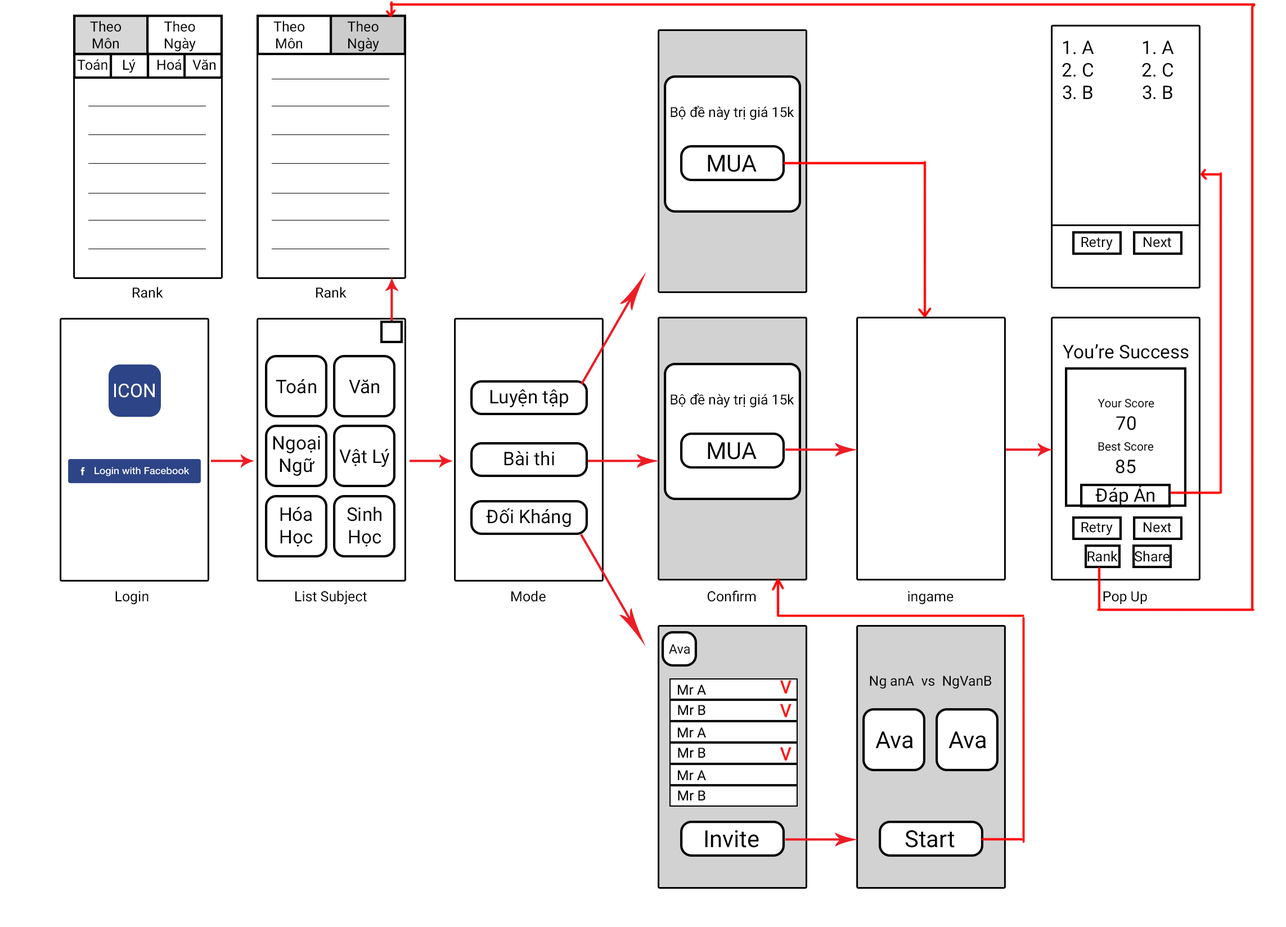
<style>
.page{position:relative;width:1286px;height:927px;background:#ffffff}
.page>*{position:absolute;margin:0}
.t1{font:14.1px "Roboto-Regular";color:#000000}
.t2{font:18.8px "Roboto-Regular";color:#000000}
.t3{font:13.9px "Roboto-Regular";color:#000000}
.t4{font:23.4px "Roboto-Regular";color:#000000}
.t5{font:18.8px "Roboto-Regular";color:#ffffff}
.t6{font:11.7px "Roboto-Regular";color:#000000}
.t7{font:13.2px "Roboto-Regular";color:#000000}
</style>
<div class="page">
<p class="t1" style="left:90px;top:21px;width:32px;height:28px;text-align:center">Theo<br>Môn</p>
<p class="t1" style="left:164px;top:21px;width:32px;height:31px;text-align:center">Theo<br>Ngày</p>
<p class="t1" style="left:273px;top:21px;width:32px;height:28px;text-align:center">Theo<br>Môn</p>
<p class="t1" style="left:348px;top:21px;width:31px;height:31px;text-align:center">Theo<br>Ngày</p>
<p class="t2" style="left:1062px;top:41px;width:32px;height:59px;text-align:center">1. A<br>2. C<br>3. B</p>
<p class="t2" style="left:1142px;top:41px;width:32px;height:59px;text-align:center">1. A<br>2. C<br>3. B</p>
<p class="t1" style="left:77px;top:59px;width:138px;height:14px">Toán    Lý      Hoá   Văn</p>
<p class="t3" style="left:671px;top:106px;width:123px;height:14px">Bộ đề này trị giá 15k</p>
<p class="t4" style="left:708px;top:155px;width:49px;height:17px">MUA</p>
<p class="t1" style="left:1081px;top:237px;width:32px;height:13px">Retry</p>
<p class="t1" style="left:1144px;top:237px;width:27px;height:11px">Next</p>
<p class="t1" style="left:133px;top:287px;width:30px;height:11px">Rank</p>
<p class="t1" style="left:316px;top:287px;width:31px;height:11px">Rank</p>
<p class="t2" style="left:1063px;top:344px;width:126px;height:15px">You’re Success</p>
<p class="t5" style="left:114px;top:384px;width:41px;height:14px">ICON</p>
<p class="t2" style="left:276px;top:379px;width:40px;height:15px">Toán</p>
<p class="t2" style="left:349px;top:379px;width:30px;height:15px">Văn</p>
<p class="t2" style="left:490px;top:389px;width:78px;height:18px">Luyện tập</p>
<p class="t3" style="left:671px;top:393px;width:123px;height:15px">Bộ đề này trị giá 15k</p>
<p class="t6" style="left:1098px;top:398px;width:56px;height:32px;text-align:center">Your Score<br><span class="t2">70</span></p>
<p class="t2" style="left:273px;top:436px;width:47px;height:40px;text-align:center">Ngoại<br>Ngữ</p>
<p class="t2" style="left:339px;top:449px;width:51px;height:18px">Vật Lý</p>
<p class="t4" style="left:708px;top:442px;width:49px;height:18px">MUA</p>
<p class="t6" style="left:1098px;top:442px;width:56px;height:32px;text-align:center">Best Score<br><span class="t2">85</span></p>
<p class="t2" style="left:504px;top:451px;width:50px;height:15px">Bài thi</p>
<p class="t2" style="left:1095px;top:485px;width:59px;height:21px">Đáp Án</p>
<p class="t2" style="left:280px;top:507px;width:33px;height:40px;text-align:center">Hóa<br>Học</p>
<p class="t2" style="left:347px;top:507px;width:34px;height:40px;text-align:center">Sinh<br>Học</p>
<p class="t2" style="left:486px;top:508px;width:85px;height:19px">Đối Kháng</p>
<p class="t1" style="left:1081px;top:522px;width:32px;height:14px">Retry</p>
<p class="t1" style="left:1144px;top:522px;width:27px;height:11px">Next</p>
<p class="t1" style="left:1088px;top:551px;width:30px;height:11px">Rank</p>
<p class="t1" style="left:1135px;top:551px;width:35px;height:11px">Share</p>
<p class="t1" style="left:115px;top:591px;width:34px;height:14px">Login</p>
<p class="t1" style="left:295px;top:591px;width:72px;height:14px">List Subject</p>
<p class="t1" style="left:511px;top:591px;width:35px;height:11px">Mode</p>
<p class="t1" style="left:708px;top:591px;width:48px;height:11px">Confirm</p>
<p class="t1" style="left:908px;top:591px;width:46px;height:14px">ingame</p>
<p class="t1" style="left:1103px;top:591px;width:44px;height:13px">Pop Up</p>
<p class="t7" style="left:669px;top:644px;width:21px;height:10px">Ava</p>
<p class="t3" style="left:870px;top:676px;width:121px;height:13px">Ng anA  vs  NgVanB</p>
<p class="t4" style="left:875px;top:731px;width:38px;height:18px">Ava</p>
<p class="t4" style="left:949px;top:731px;width:37px;height:18px">Ava</p>
<p class="t4" style="left:705px;top:830px;width:54px;height:18px">Invite</p>
<p class="t4" style="left:905px;top:830px;width:50px;height:18px">Start</p>
</div>
